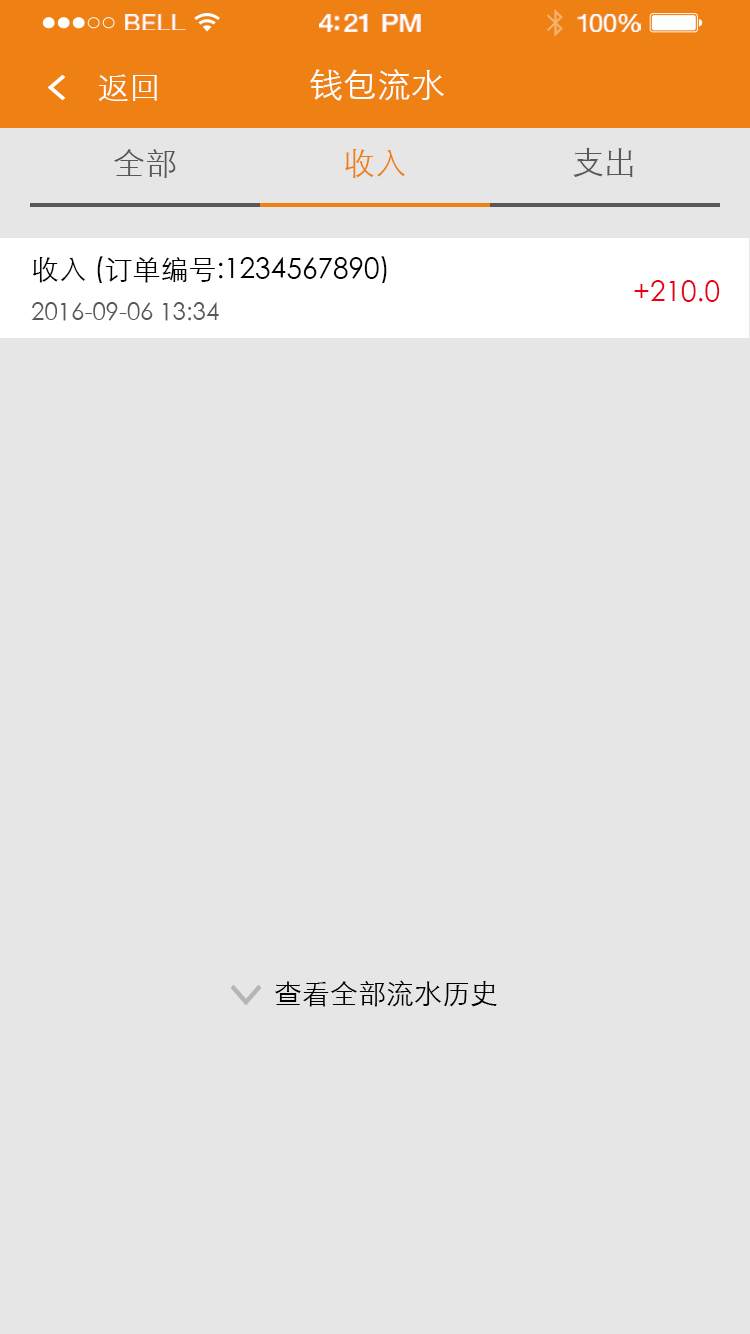
<style>
.page{position:relative;width:750px;height:1334px;background:#e6e6e6}
.page>*{position:absolute;margin:0}
.t1{font:23.3px "HelveticaNeue";letter-spacing:0.02em;color:#ffffff;scale:1.06 1}
.t2{font:25.3px "HelveticaNeue-Medium";letter-spacing:-0.02em;color:#ffffff;scale:1.06 1}
.t3{font:24.3px "HelveticaNeue";letter-spacing:-0.02em;color:#ffffff;scale:1.06 1}
.t4{font:32px "STXihei";color:#ffffff}
.t5{font:34px "STXihei";color:#ffffff}
.t6{font:32px "STXihei";color:#595757}
.t7{font:32px "STXihei";color:#ef8013}
.t8{font:28px/46px "STXihei";color:#000000}
.t9{font:24px/46px "STXihei";color:#595757}
.t10{font:28px "STXihei";color:#e60012}
.t11{font:28px "STXihei";color:#000000}
</style>
<div class="page">
<p class="t1" style="left:125px;top:14px;width:61px;height:16px">BELL</p>
<p class="t2" style="left:319px;top:14px;width:102px;height:18px">4:21 PM</p>
<p class="t3" style="left:577px;top:14px;width:64px;height:18px">100%</p>
<p class="t4" style="left:98px;top:74px;width:59px;height:27px">返回</p>
<p class="t5" style="left:310px;top:69px;width:134px;height:32px">钱包流水</p>
<p class="t6" style="left:114px;top:149px;width:62px;height:29px">全部</p>
<p class="t7" style="left:345px;top:149px;width:60px;height:29px">收入</p>
<p class="t6" style="left:573px;top:147px;width:60px;height:30px">支出</p>
<p class="t8" style="left:31px;top:256px;width:356px;height:65px">收入 (订单编号:1234567890)<br><span class="t9">2016-09-06 13:34</span></p>
<p class="t10" style="left:634px;top:280px;width:86px;height:22px">+210.0</p>
<p class="t11" style="left:275px;top:980px;width:222px;height:27px">查看全部流水历史</p>
</div>
